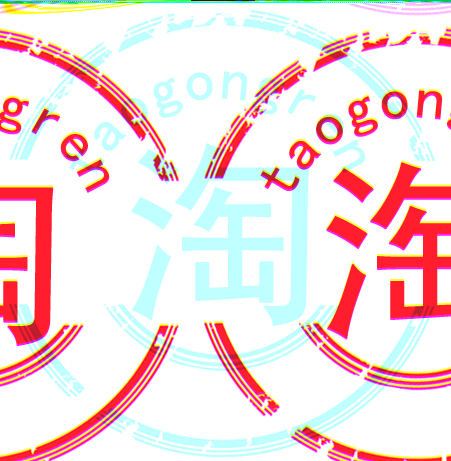
<style>
.page{position:relative;width:451px;height:461px;background:#ffffff}
.page>*{position:absolute;margin:0}
.t1{font:60px "SimHei";font-weight:bold}
.t2{font:200px "SimHei";color:#c0ffff;font-weight:bold}
</style>
<div class="page">
<p class="t1" style="left:65px;top:68px;width:301px;height:102px">taogongren</p>
<p class="t2" style="left:131px;top:140px;width:179px;height:183px">淘</p>
</div>
